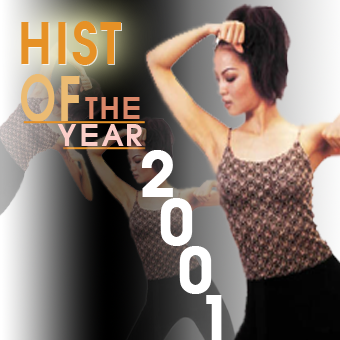
<style>
.page{position:relative;width:340px;height:340px}
.page>*{position:absolute;margin:0}
.t1{font:56.8px "VNI-Avo-Bold";letter-spacing:0.05em;color:#e69126;scale:0.88 1}
.t2{font:60.6px "VNI-Avo-Bold";letter-spacing:0.05em;color:#ebbb73;scale:0.79 1}
.t3{font:30px "VNI-Avo-Bold";letter-spacing:0.05em;color:#d98668}
.t4{font:30px "VNI-Avo-Bold";letter-spacing:0.05em;color:#fbcec8}
.t5{font:60px/48px "VNI-Avo-Bold";color:#ffffff;text-transform:uppercase;font-weight:bold}
</style>
<div class="page">
<p class="t1" style="left:21px;top:21px;width:100px;height:44px">HIST</p>
<p class="t2" style="left:21px;top:74px;width:59px;height:48px">OF</p>
<p class="t3" style="left:85px;top:97px;width:55px;height:22px">THE</p>
<p class="t4" style="left:57px;top:124px;width:85px;height:22px">YEAR</p>
<p class="t5" style="left:142px;top:150px;width:80px;height:191px">2<br> 0<br>  0<br>   1</p>
</div>
